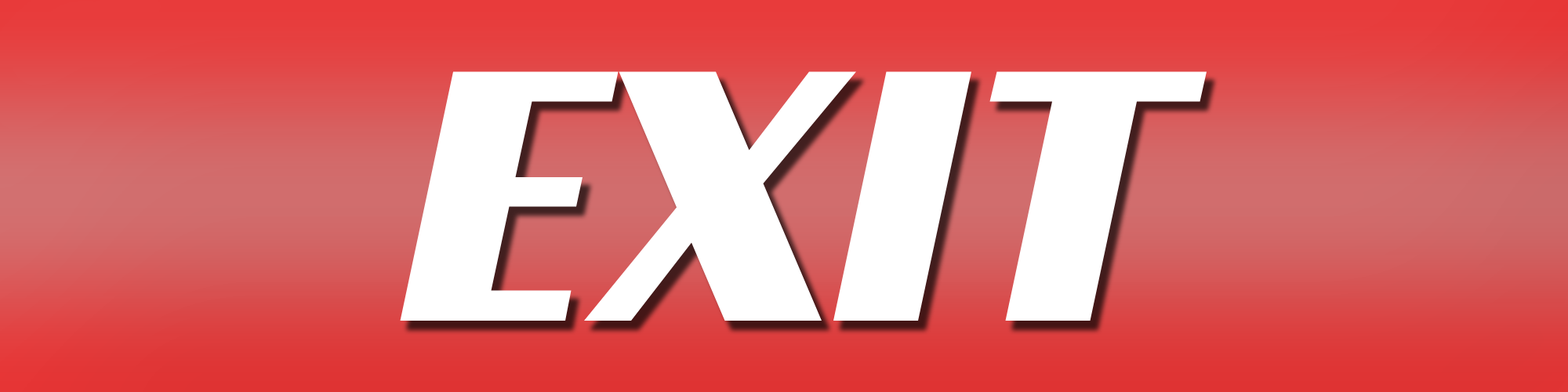
<style>
.page{position:relative;width:1568px;height:392px}
.page>*{position:absolute;margin:0}
.t1{font:392px "RacingSansOne-Regular";color:#ffffff}
</style>
<div class="page">
<p class="t1" style="left:400px;top:71px;width:807px;height:250px">EXIT</p>
</div>
